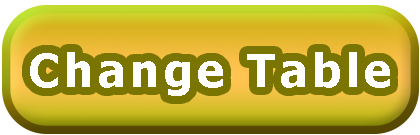
<style>
.page{position:relative;width:420px;height:135px}
.page>*{position:absolute;margin:0}
.t1{font:45.8px "Tahoma-Bold";letter-spacing:0.1em;color:#ffffff}
</style>
<div class="page">
<p class="t1" style="left:30px;top:52px;width:360px;height:44px">Change Table</p>
</div>
